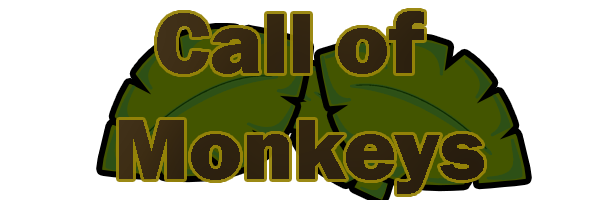
<style>
.page{position:relative;width:600px;height:200px;background:#ffffff}
.page>*{position:absolute;margin:0}
.t1{font:88.9px "FranklinGothic-Heavy";color:#3e3018}
</style>
<div class="page">
<p class="t1" style="left:119px;top:11px;width:365px;height:183px;text-align:center">Call of <br>Monkeys</p>
</div>
